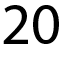
<style>
.page{position:relative;width:64px;height:64px;background:#ffffff}
.page>*{position:absolute;margin:0}
.t1{font:58.3px "MyriadPro-Regular";color:#000000}
</style>
<div class="page">
<p class="t1" style="left:3px;top:5px;width:56px;height:39px">20</p>
</div>
